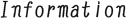
<style>
.page{position:relative;width:126px;height:18px;background:#ffffff}
.page>*{position:absolute;margin:0}
.t1{font:22px "PenkaiEG-Light-SJIS";color:#111111;font-weight:bold}
</style>
<div class="page">
<p class="t1" style="left:0px;top:0px;width:126px;height:18px">Information</p>
</div>
